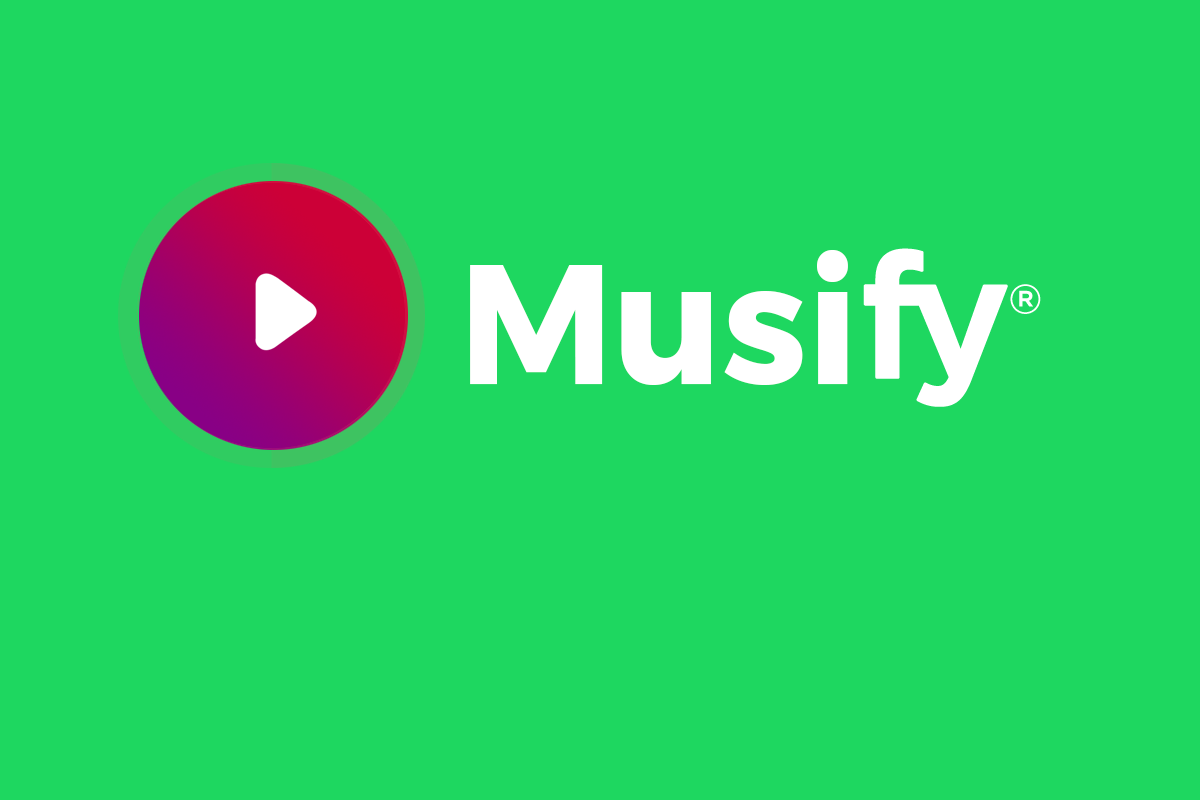
<style>
.page{position:relative;width:1200px;height:800px;background:#1ed760}
.page>*{position:absolute;margin:0}
.t1{font:169.7px "Montserrat-Bold";color:#ffffff;scale:0.97 1}
</style>
<div class="page">
<p class="t1" style="left:470px;top:249px;width:378px;height:136px">Musi</p>
</div>
